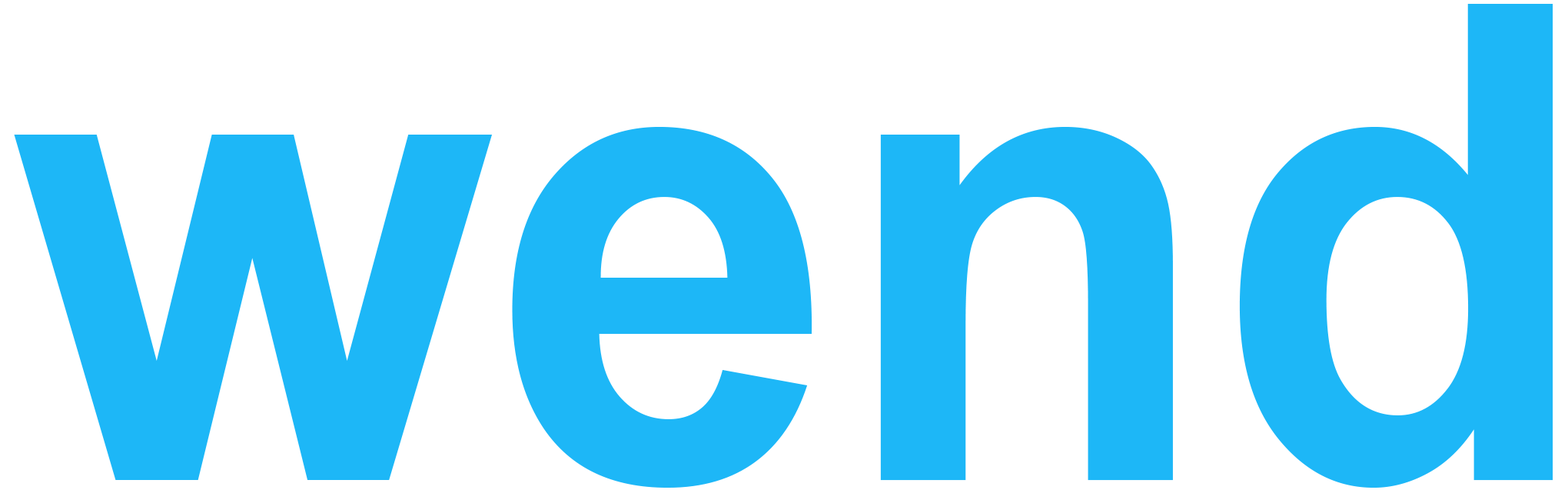
<style>
.page{position:relative;width:1568px;height:490px;background:#ffffff}
.page>*{position:absolute;margin:0}
.t1{font:664.8px "Arial-BoldMT";color:#1db7f7;scale:0.93 1}
</style>
<div class="page">
<p class="t1" style="left:14px;top:4px;width:1539px;height:483px">wend</p>
</div>
